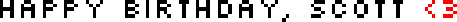
<style>
.page{position:relative;width:457px;height:22px;background:#ffffff}
.page>*{position:absolute;margin:0}
.t1{font:30px "Silkscreen";color:#000000}
.t2{font:30px "Silkscreen";color:#ff0000}
</style>
<div class="page">
<p class="t1" style="left:0px;top:0px;width:457px;height:22px">HAPPY BIRTHDAY, SCOTT <span class="t2">&lt;3</span></p>
</div>
